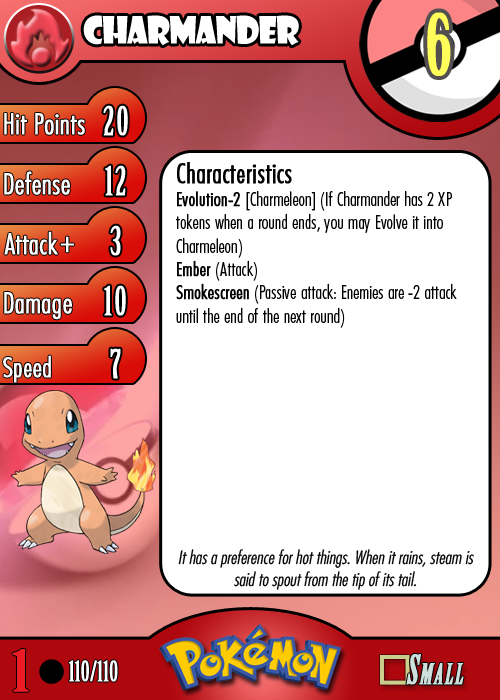
<style>
.page{position:relative;width:500px;height:700px;background:#ffffff}
.page>*{position:absolute;margin:0}
.t1{font:36.7px "ShowcardGothic-Reg";letter-spacing:-0.025em;color:#ffffff;scale:0.91 1}
.t2{font:83.3px "BirchStd";letter-spacing:0.025em;color:#fffd59;font-weight:bold}
.t3{font:27.8px "Futura-CondensedLight";color:#ffffff;font-weight:bold}
.t4{font:38.9px "BirchStd";letter-spacing:0.035em;color:#ffffff;font-weight:bold}
.t5{font:19.4px "FuturaCondensedBQ-Light";color:#010101}
.t6{font:27.8px "FuturaCondensedBQ-Light";color:#010101;font-weight:bold}
.t7{font:19.4px "FuturaCondensedBQ-Light";color:#010101;font-weight:bold}
.t8{font:30.6px "Futura-CondensedLight";color:#ffffff;font-weight:bold}
.t9{font:27.8px "FuturaCondensedBQ-Light";color:#ffffff;font-weight:bold}
.t10{font:18.1px "Futura-CondensedLight";color:#010101;font-style:italic}
.t11{font:55.6px "BirchStd";color:#ed1c24;font-weight:bold;scale:1.5 1}
.t12{font:27.8px "BirchStd";color:#ffffff;font-weight:bold}
</style>
<div class="page">
<p class="t1" style="left:83px;top:15px;width:216px;height:31px">charmander</p>
<p class="t2" style="left:427px;top:12px;width:24px;height:64px">6</p>
<p class="t3" style="left:4px;top:113px;width:81px;height:22px">Hit Points</p>
<p class="t4" style="left:103px;top:105px;width:25px;height:31px">20</p>
<p class="t3" style="left:4px;top:171px;width:66px;height:24px">Defense</p>
<p class="t4" style="left:105px;top:165px;width:21px;height:31px">12</p>
<p class="t5" style="left:176px;top:162px;width:281px;height:166px"><span class="t6">Characteristics<br></span><span class="t7">Evolution-2 </span>[Charmeleon] (If Charmander has 2 XP tokens when a round ends, you may Evolve it into Charmeleon)<br><span class="t7">Ember</span> (Attack)<br><span class="t7">Smokescreen</span> (Passive attack: Enemies are -2 attack until the end of the next round)</p>
<p class="t3" style="left:4px;top:231px;width:54px;height:24px">Attack</p>
<p class="t4" style="left:110px;top:225px;width:11px;height:31px">3</p>
<p class="t8" style="left:60px;top:236px;width:14px;height:17px">+</p>
<p class="t3" style="left:4px;top:292px;width:68px;height:28px">Damage</p>
<p class="t4" style="left:104px;top:285px;width:22px;height:31px">10</p>
<p class="t4" style="left:110px;top:348px;width:11px;height:31px">7</p>
<p class="t9" style="left:3px;top:355px;width:48px;height:28px">Speed</p>
<p class="t10" style="left:178px;top:549px;width:296px;height:41px;text-align:center">It has a preference for hot things. When it rains, steam is said to spout from the tip of its tail.</p>
<p class="t11" style="left:12px;top:649px;width:17px;height:43px">1</p>
<p class="t12" style="left:68px;top:660px;width:50px;height:22px">110/110</p>
</div>
